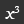
<style>
.page{position:relative;width:24px;height:24px;background:#333333}
.page>*{position:absolute;margin:0}
.t1{font:24px "Gabriola";color:#ffffff}
</style>
<div class="page">
<p class="t1" style="left:5px;top:6px;width:15px;height:13px">x3</p>
</div>
